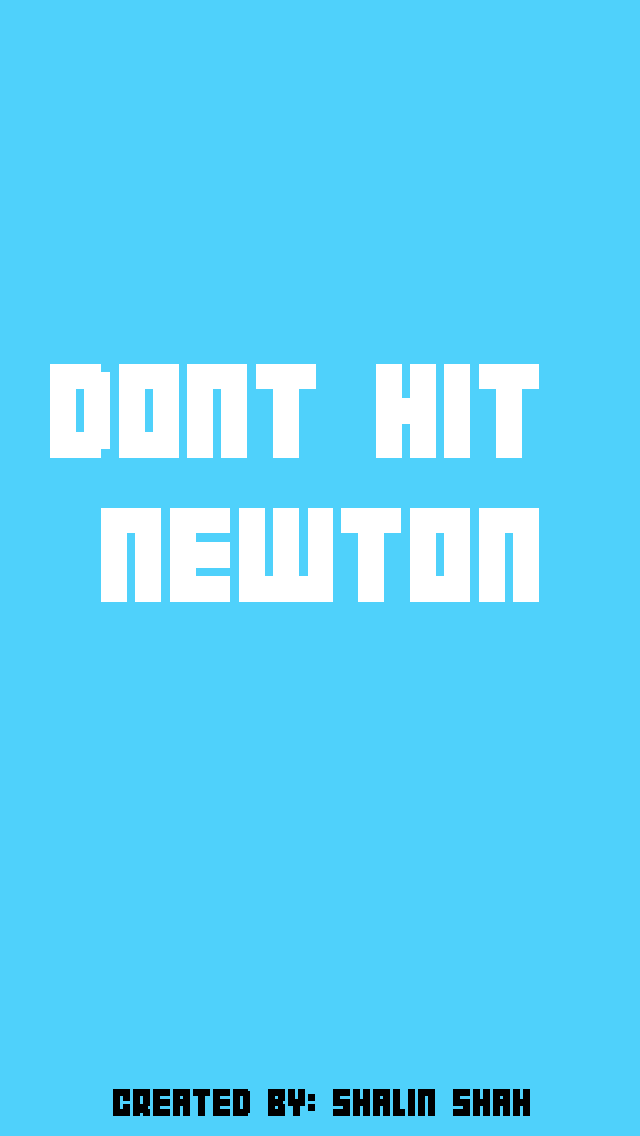
<style>
.page{position:relative;width:640px;height:1136px;background:#4fd1fb}
.page>*{position:absolute;margin:0}
.t1{font:120px "04b19";color:#ffffff}
.t2{font:35px "04b19";color:#000000}
</style>
<div class="page">
<p class="t1" style="left:50px;top:364px;width:489px;height:238px;text-align:center">DONT HIT <br>NEWTON</p>
<p class="t2" style="left:113px;top:1089px;width:417px;height:27px">CREATED BY: SHALIN SHAH</p>
</div>
